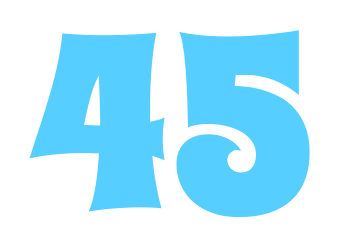
<style>
.page{position:relative;width:354px;height:236px;background:#ffffff}
.page>*{position:absolute;margin:0}
.t1{font:250px "SpicyRice-Regular";color:#56ceff}
</style>
<div class="page">
<p class="t1" style="left:29px;top:30px;width:281px;height:188px">45</p>
</div>
